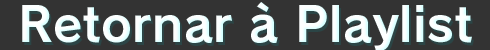
<style>
.page{position:relative;width:490px;height:50px;background:#333333}
.page>*{position:absolute;margin:0}
.t1{font:48px "RodinPro-B";color:#feffff}
</style>
<div class="page">
<p class="t1" style="left:22px;top:2px;width:450px;height:50px">Retornar à Playlist</p>
</div>
